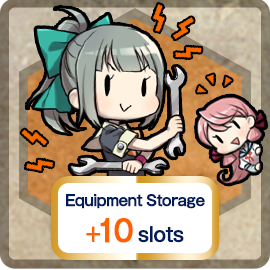
<style>
.page{position:relative;width:270px;height:270px}
.page>*{position:absolute;margin:0}
.t1{font:15px "GothicMB101Pro-Medium";letter-spacing:-0.04em;color:#001d59;font-weight:bold;scale:0.9 1}
.t2{font:20px "GothicMB101Pro-Medium";letter-spacing:-0.04em;color:#ff6000;font-weight:bold;scale:0.9 1}
.t3{font:30px "GothicMB101Pro-Medium";letter-spacing:-0.04em;color:#ff6000;font-weight:bold;scale:0.9 1}
.t4{font:20px "GothicMB101Pro-Medium";letter-spacing:-0.04em;color:#001d59;font-weight:bold;scale:0.9 1}
</style>
<div class="page">
<p class="t1" style="left:66px;top:194px;width:139px;height:49px;text-align:center">Equipment Storage<br><span class="t2">+</span><span class="t3">10 </span><span class="t4">slots</span></p>
</div>
